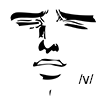
<style>
.page{position:relative;width:100px;height:100px;background:#ffffff}
.page>*{position:absolute;margin:0}
.t1{font:14px "ArialMT";color:#000000}
</style>
<div class="page">
<p class="t1" style="left:78px;top:74px;width:16px;height:10px">/v/</p>
</div>
